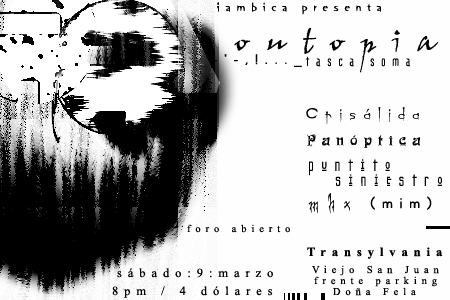
<style>
.page{position:relative;width:450px;height:300px;background:#fefefe}
.page>*{position:absolute;margin:0}
.t1{font:12px "OrangeLetPlain";letter-spacing:0.475em;color:#000000}
.t2{font:33.3px "JohnHandyLetPlain";letter-spacing:0.475em;color:#000000}
.t3{font:14.6px "Gothikka";letter-spacing:0.475em;color:#000000}
.t4{font:16.7px "Ogilvie";letter-spacing:0.475em;color:#000000}
.t5{font:13.3px "Funk-Regular";letter-spacing:0.475em;color:#000000}
.t6{font:17.5px "Kashmir";letter-spacing:0.475em;color:#000000}
.t7{font:14.6px "OdessaLetPlain";letter-spacing:0.475em;color:#000000}
.t8{font:20.8px "Creepygirl";letter-spacing:0.475em;color:#000000}
.t9{font:10.4px "TimesNewRomanPSMT";letter-spacing:0.475em;color:#000000}
.t10{font:12.5px "TimesNewRomanPS-BoldMT";letter-spacing:0.475em;color:#000000}
.t11{font:12.5px "TimesNewRomanPSMT";letter-spacing:0.475em;color:#000000}
</style>
<div class="page">
<p class="t1" style="left:217px;top:2px;width:164px;height:13px">iambica presenta</p>
<p class="t2" style="left:234px;top:27px;width:205px;height:46px">outopia</p>
<p class="t3" style="left:305px;top:56px;width:106px;height:11px">tasca soma</p>
<p class="t4" style="left:306px;top:107px;width:113px;height:18px">Crisálida</p>
<p class="t5" style="left:307px;top:134px;width:114px;height:14px">Panóptica</p>
<p class="t6" style="left:309px;top:159px;width:81px;height:17px">puntito</p>
<p class="t6" style="left:335px;top:174px;width:107px;height:12px">siniestro</p>
<p class="t7" style="left:308px;top:193px;width:124px;height:21px"><span class="t8">mhx</span> (mim)</p>
<p class="t9" style="left:187px;top:224px;width:103px;height:9px">foro abierto</p>
<p class="t10" style="left:307px;top:247px;width:136px;height:12px">Transylvania</p>
<p class="t11" style="left:117px;top:268px;width:156px;height:10px">sábado:9:marzo</p>
<p class="t9" style="left:312px;top:265px;width:127px;height:11px">Viejo San Juan</p>
<p class="t9" style="left:314px;top:276px;width:123px;height:11px">frente parking</p>
<p class="t11" style="left:112px;top:286px;width:161px;height:12px">8pm / 4 dólares</p>
<p class="t9" style="left:333px;top:287px;width:83px;height:9px">Doña Fela</p>
</div>
